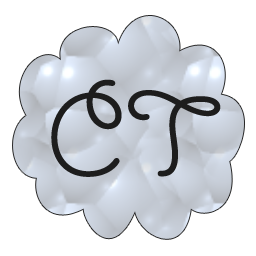
<style>
.page{position:relative;width:256px;height:256px;background:#ffffff}
.page>*{position:absolute;margin:0}
.t1{font:131px "GiddyupStd";color:#1d1d1d}
</style>
<div class="page">
<p class="t1" style="left:51px;top:79px;width:170px;height:98px">CT</p>
</div>
